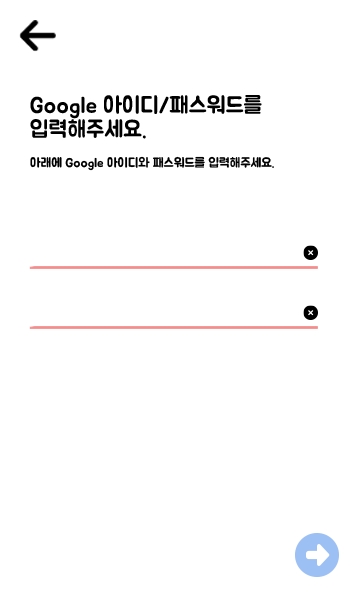
<style>
.page{position:relative;width:360px;height:600px;background:#ffffff}
.page>*{position:absolute;margin:0}
.t1{font:23px/24px "BMJUA";color:#000000}
.t2{font:13px "BMJUA";color:#000000}
</style>
<div class="page">
<p class="t1" style="left:30px;top:95px;width:232px;height:44px">Google 아이디/패스워드를<br>입력해주세요.</p>
<p class="t2" style="left:30px;top:156px;width:244px;height:15px">아래에 Google 아이디와 패스워드를 입력해주세요.</p>
</div>
